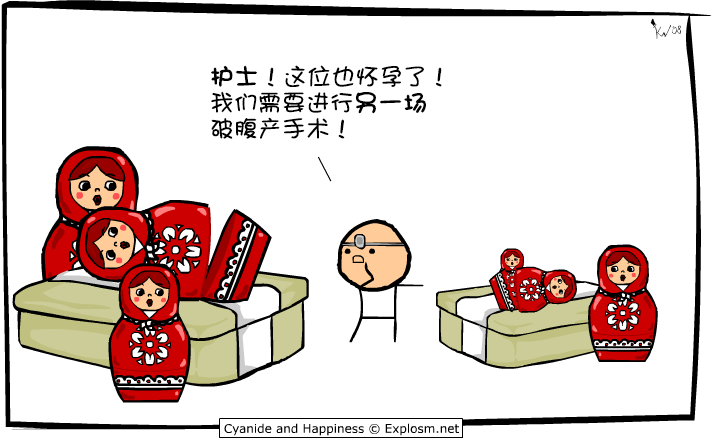
<style>
.page{position:relative;width:713px;height:440px;background:#ffffff}
.page>*{position:absolute;margin:0}
.t1{font:24px/26px "DFGirl";color:#000000}
.t2{font:24px/26px "DFGirl";color:#000000;font-weight:bold}
</style>
<div class="page">
<p class="t1" style="left:211px;top:65px;width:231px;height:74px"><span class="t2">护士</span>！这位也怀孕了！<br>我们需要进行<span class="t2">另一场<br></span>破腹产手术！</p>
</div>
